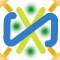
<style>
.page{position:relative;width:60px;height:60px;background:#327cc7}
.page>*{position:absolute;margin:0}
.t1{font:70px "OCRAStd";color:#327cc7}
.t2{font:60px "OCRAStd";color:#d0de38}
</style>
<div class="page">
<p class="t1" style="left:3px;top:12px;width:55px;height:36px;rotate:91deg">S</p>
<p class="t2" style="left:16px;top:7px;width:30px;height:47px">X</p>
</div>
